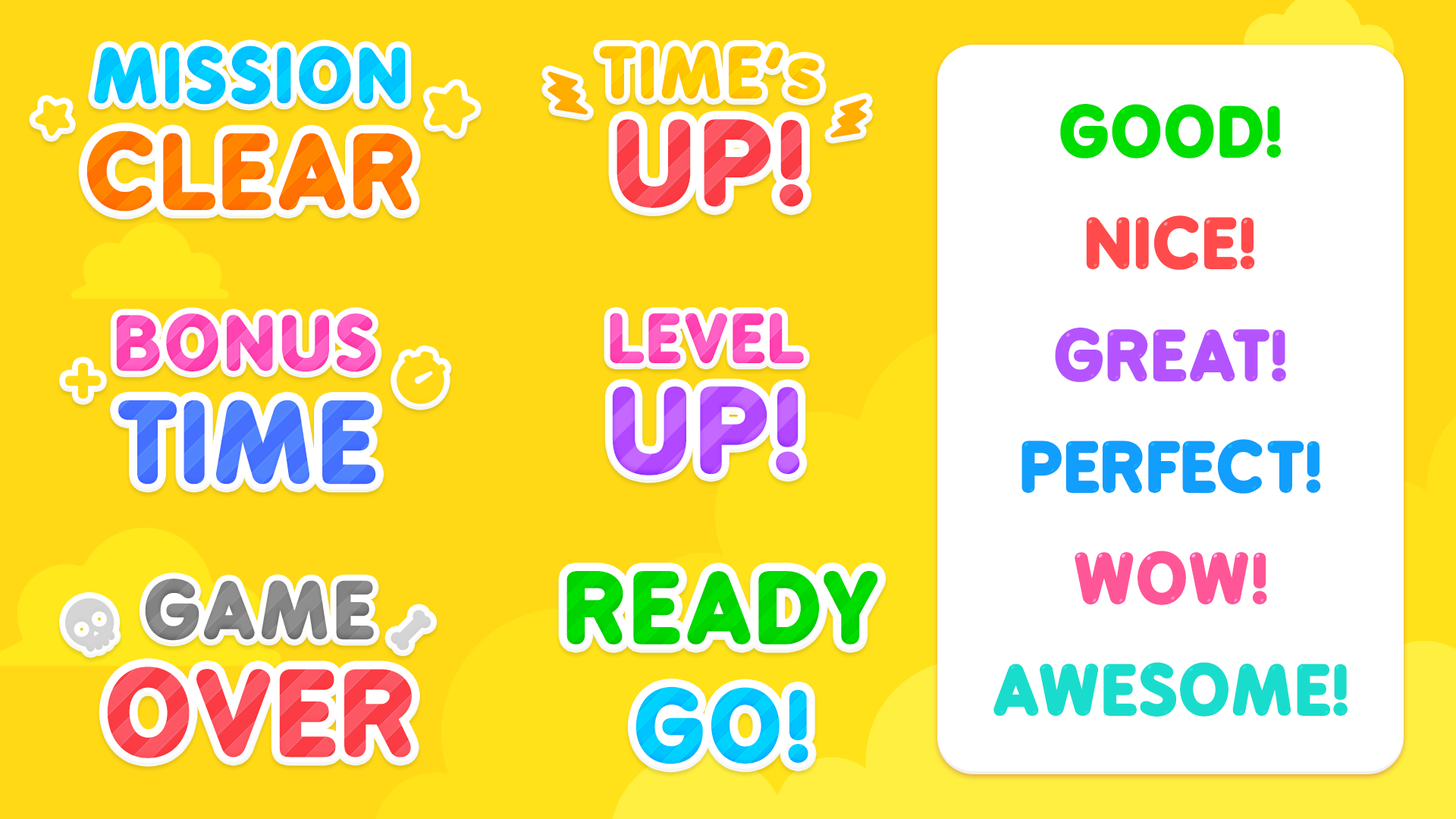
<style>
.page{position:relative;width:1456px;height:819px;background:#ffd916}
.page>*{position:absolute;margin:0}
.t1{font:69.2px "BPreplay-Bold";letter-spacing:0.03em;color:#00d2ff;font-weight:bold;scale:1.05 1}
.t2{font:64.8px "BPreplay-Bold";letter-spacing:0.03em;color:#ffd100;font-weight:bold;scale:1.05 1}
.t3{font:64.3px "BPreplay-Bold";color:#00dd00;text-transform:uppercase;font-weight:bold;scale:1.05 1}
.t4{font:108.1px "BPreplay-Bold";letter-spacing:0.03em;color:#fb474f;font-weight:bold;scale:1.05 1}
.t5{font:95.1px "BPreplay-Bold";letter-spacing:0.03em;color:#ff8400;font-weight:bold;scale:1.05 1}
.t6{font:64.3px "BPreplay-Bold";color:#ff4b4b;text-transform:uppercase;font-weight:bold;scale:1.05 1}
.t7{font:69.2px "BPreplay-Bold";letter-spacing:0.03em;color:#ff53bb;font-weight:bold;scale:1.05 1}
.t8{font:61.8px "BPreplay-Bold";letter-spacing:0.03em;color:#ff53bc;font-weight:bold;scale:1.05 1}
.t9{font:64.3px "BPreplay-Bold";color:#b454fe;text-transform:uppercase;font-weight:bold;scale:1.05 1}
.t10{font:108.5px "BPreplay-Bold";letter-spacing:0.03em;font-weight:bold;scale:1.05 1}
.t11{font:103.7px "BPreplay-Bold";letter-spacing:0.03em;color:#5283ff;font-weight:bold;scale:1.05 1}
.t12{font:64.3px "BPreplay-Bold";color:#119dfb;text-transform:uppercase;font-weight:bold;scale:1.05 1}
.t13{font:64.3px "BPreplay-Bold";color:#fe5696;text-transform:uppercase;font-weight:bold;scale:1.05 1}
.t14{font:72.6px "BPreplay-Bold";letter-spacing:0.03em;color:#8e8e8e;font-weight:bold;scale:1.05 1}
.t15{font:90.8px "BPreplay-Bold";letter-spacing:0.03em;color:#00dd00;font-weight:bold;scale:1.05 1}
.t16{font:64.3px "BPreplay-Bold";color:#1adccc;text-transform:uppercase;font-weight:bold;scale:1.05 1}
.t17{font:108.9px "BPreplay-Bold";letter-spacing:0.03em;font-weight:bold;scale:1.05 1}
.t18{font:90.8px "BPreplay-Bold";letter-spacing:0.03em;color:#00d2ff;font-weight:bold;scale:1.05 1}
</style>
<div class="page">
<p class="t1" style="left:94px;top:45px;width:312px;height:60px">MISSION</p>
<p class="t2" style="left:599px;top:45px;width:222px;height:54px">TIME’s</p>
<p class="t3" style="left:1060px;top:104px;width:221px;height:54px">GOOD!</p>
<p class="t4" style="left:617px;top:119px;width:186px;height:89px">UP!</p>
<p class="t5" style="left:86px;top:130px;width:327px;height:82px">CLEAR</p>
<p class="t6" style="left:1086px;top:215px;width:169px;height:55px">NICE!</p>
<p class="t7" style="left:116px;top:313px;width:260px;height:59px">BONUS</p>
<p class="t8" style="left:610px;top:313px;width:194px;height:50px">LEVEL</p>
<p class="t9" style="left:1055px;top:328px;width:231px;height:54px">Great!</p>
<p class="t10" style="left:612px;top:386px;width:188px;height:89px">UP!</p>
<p class="t11" style="left:118px;top:400px;width:258px;height:85px">TIME</p>
<p class="t12" style="left:1021px;top:439px;width:300px;height:55px">PERFECT!</p>
<p class="t13" style="left:1075px;top:551px;width:192px;height:54px">wow!</p>
<p class="t14" style="left:145px;top:579px;width:229px;height:62px">GAME</p>
<p class="t15" style="left:566px;top:570px;width:312px;height:75px">READY</p>
<p class="t16" style="left:993px;top:662px;width:355px;height:55px">awesome!</p>
<p class="t17" style="left:107px;top:667px;width:305px;height:91px">OVER</p>
<p class="t18" style="left:635px;top:686px;width:173px;height:78px">GO!</p>
</div>
